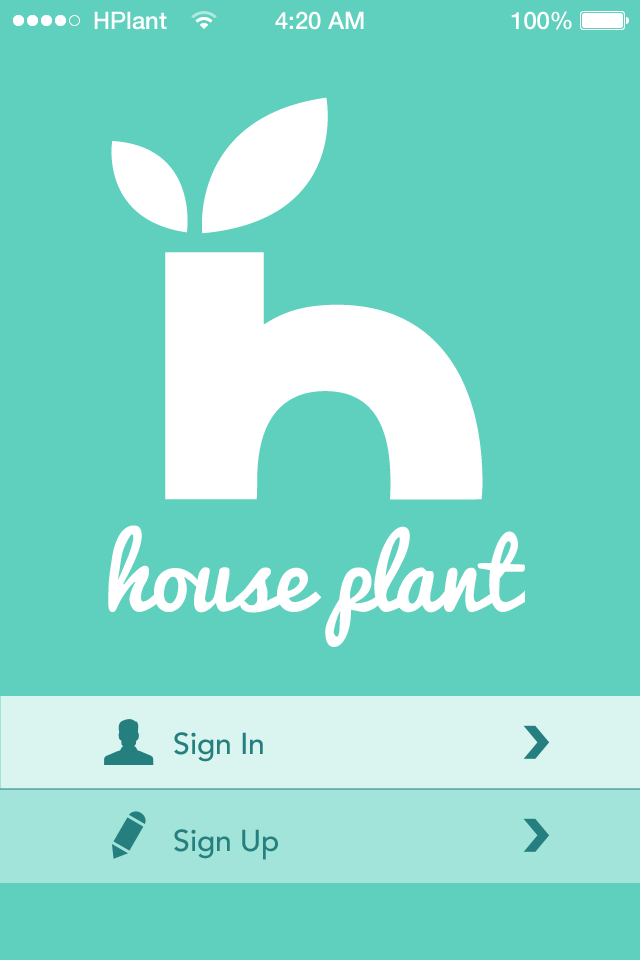
<style>
.page{position:relative;width:640px;height:960px;background:#5ed0bd}
.page>*{position:absolute;margin:0}
.t1{font:24px "HelveticaNeue-Medium";color:#ffffff}
.t2{font:92px "Pacifico";color:#ffffff}
.t3{font:30px "AvenirLT-Medium";color:#257f7f}
</style>
<div class="page">
<p class="t1" style="left:94px;top:11px;width:73px;height:19px">HPlant</p>
<p class="t1" style="left:275px;top:11px;width:89px;height:19px">4:20 AM</p>
<p class="t1" style="left:511px;top:11px;width:61px;height:19px">100%</p>
<p class="t2" style="left:108px;top:525px;width:417px;height:122px">house plant</p>
<p class="t3" style="left:174px;top:732px;width:89px;height:30px">Sign In</p>
<p class="t3" style="left:174px;top:829px;width:104px;height:31px">Sign Up</p>
</div>
